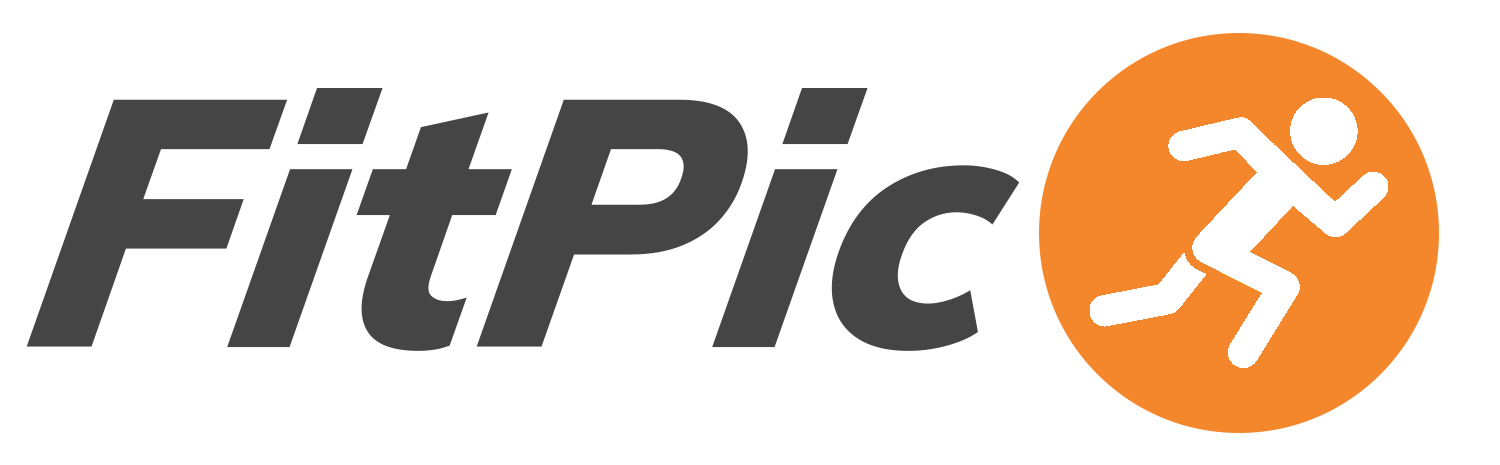
<style>
.page{position:relative;width:1500px;height:465px;background:#ffffff}
.page>*{position:absolute;margin:0}
.t1{font:350px "Mulish-BlackItalic";color:#454545;font-style:italic}
</style>
<div class="page">
<p class="t1" style="left:26px;top:88px;width:993px;height:263px">FitPic</p>
</div>
